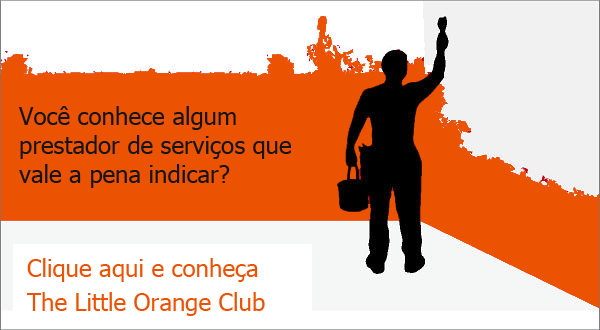
<style>
.page{position:relative;width:600px;height:330px;background:#eb5202}
.page>*{position:absolute;margin:0}
.t1{font:24px "Tahoma";color:#151515}
.t2{font:24px "Tahoma";color:#eb5202}
</style>
<div class="page">
<p class="t1" style="left:19px;top:106px;width:272px;height:82px">Você conhece algum prestador de serviços que vale a pena indicar?</p>
<p class="t2" style="left:27px;top:258px;width:231px;height:24px">Clique aqui e conheça</p>
<p class="t2" style="left:27px;top:292px;width:238px;height:24px">The Little Orange Club</p>
</div>
